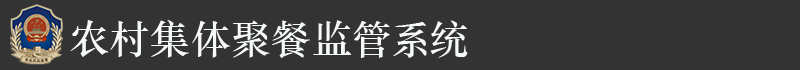
<style>
.page{position:relative;width:800px;height:70px;background:#333333}
.page>*{position:absolute;margin:0}
.t1{font:40px "STZhongsong";letter-spacing:0.05em;color:#f6f9f9}
</style>
<div class="page">
<p class="t1" style="left:70px;top:20px;width:398px;height:38px">农村集体聚餐监管系统</p>
</div>
